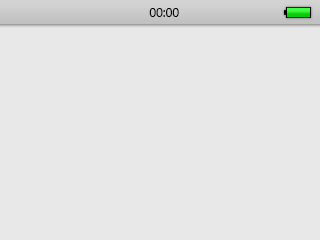
<style>
.page{position:relative;width:320px;height:240px;background:#e8e8e8}
.page>*{position:absolute;margin:0}
.t1{font:12.5px "SegoeUI";color:#000000}
</style>
<div class="page">
<p class="t1" style="left:149px;top:8px;width:30px;height:9px">00:00</p>
</div>
